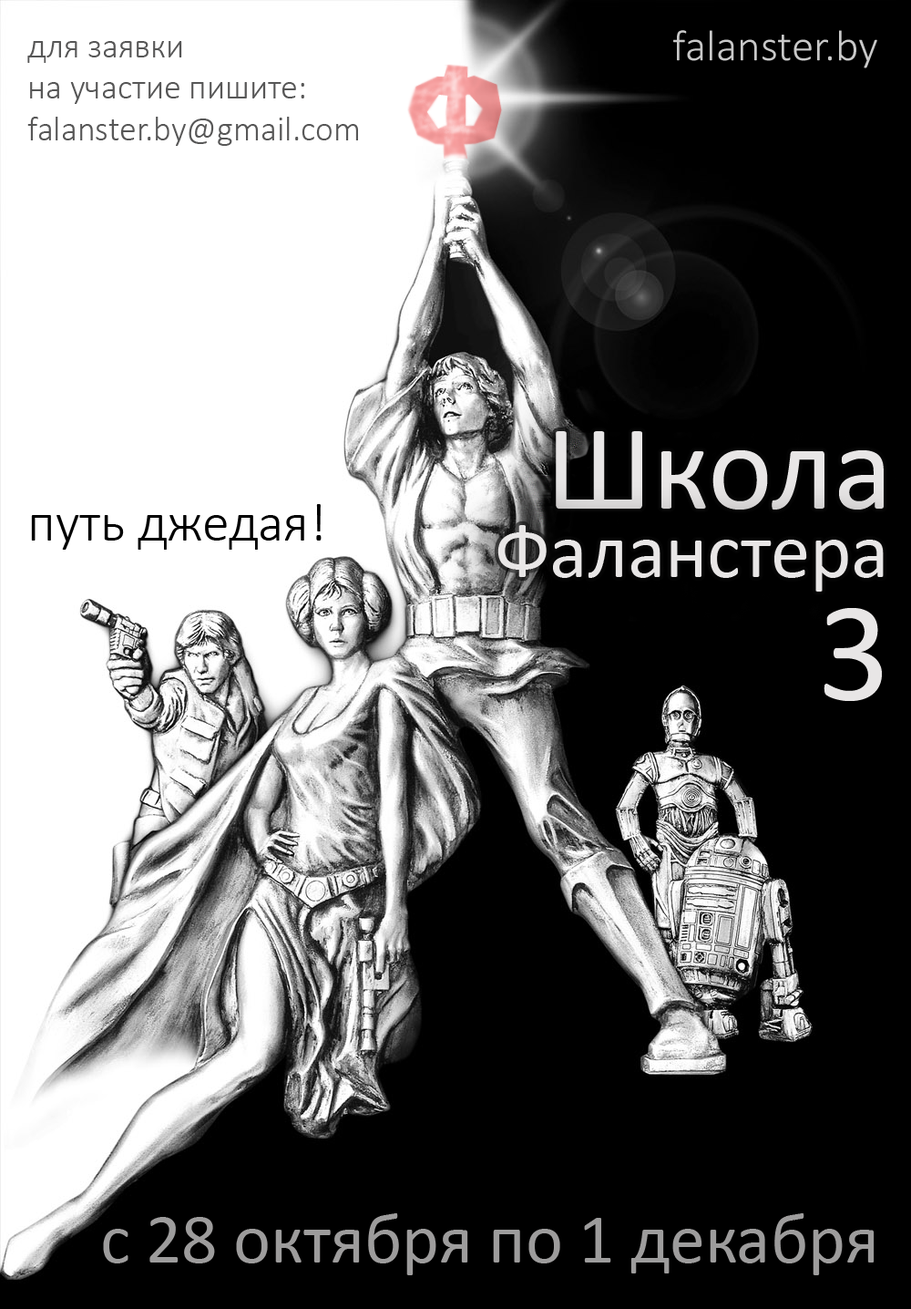
<style>
.page{position:relative;width:911px;height:1309px;background:#000000}
.page>*{position:absolute;margin:0}
.t1{font:34.6px "Calibri-Light";color:#575757}
.t2{font:43.6px "Calibri-Light";color:#c9c9c9;scale:1.03 1}
.t3{font:123.4px "Calibri";color:#e8e6e6}
.t4{font:54.3px "Calibri-Light";color:#000000}
.t5{font:78.9px "Calibri";color:#e8e6e6}
.t6{font:144.7px "Calibri";color:#e8e6e6}
.t7{font:70.7px "Calibri";color:#9d9c9c}
</style>
<div class="page">
<p class="t1" style="left:27px;top:41px;width:331px;height:105px">для заявки<br>на участие пишите:<br>falanster.by@gmail.com</p>
<p class="t2" style="left:673px;top:30px;width:205px;height:38px">falanster.by</p>
<p class="t3" style="left:556px;top:431px;width:328px;height:78px">Школа</p>
<p class="t4" style="left:31px;top:504px;width:291px;height:45px">путь джедая!</p>
<p class="t5" style="left:498px;top:525px;width:386px;height:66px">Фаланстера</p>
<p class="t6" style="left:824px;top:608px;width:58px;height:93px">3</p>
<p class="t7" style="left:103px;top:1213px;width:772px;height:62px">с 28 октября по 1 декабря</p>
</div>
